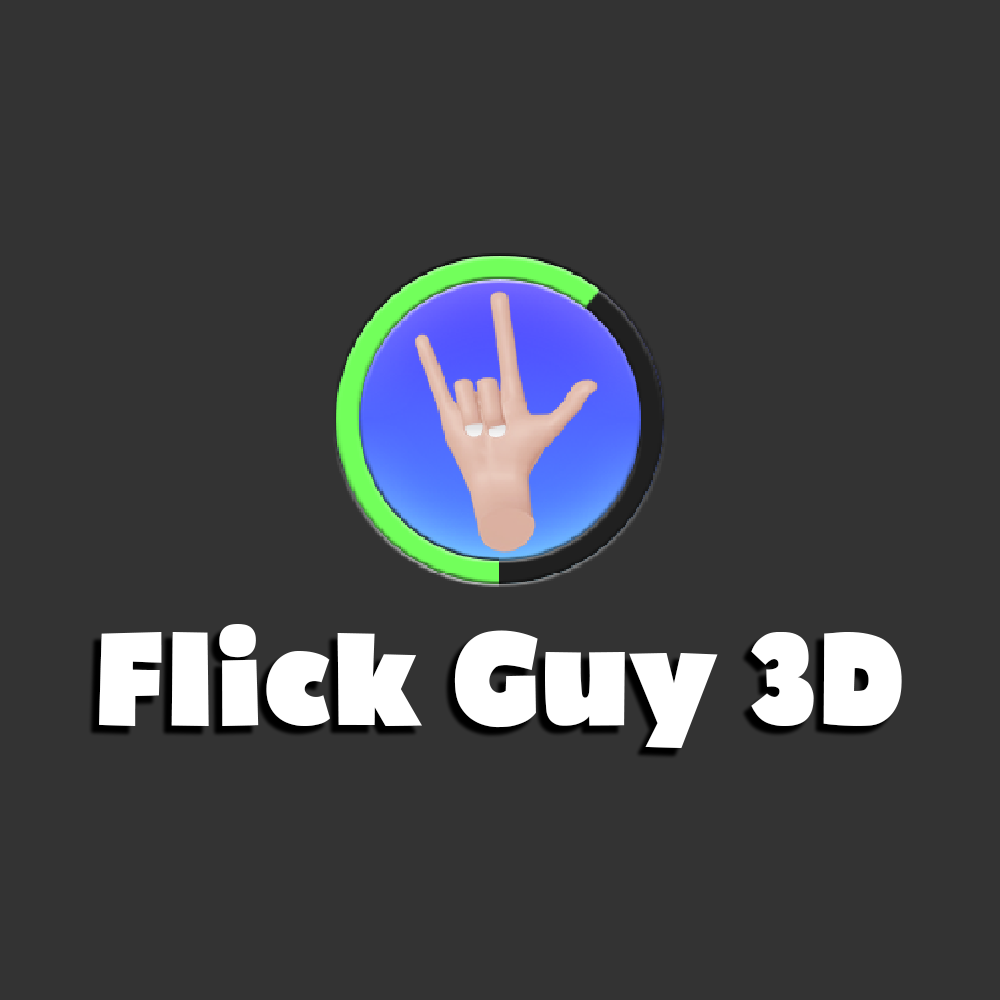
<style>
.page{position:relative;width:1000px;height:1000px;background:#333333}
.page>*{position:absolute;margin:0}
.t1{font:126.4px "Bumpo";color:#ffffff;scale:0.92 1}
</style>
<div class="page">
<p class="t1" style="left:99px;top:624px;width:803px;height:124px">Flick Guy 3D</p>
</div>
